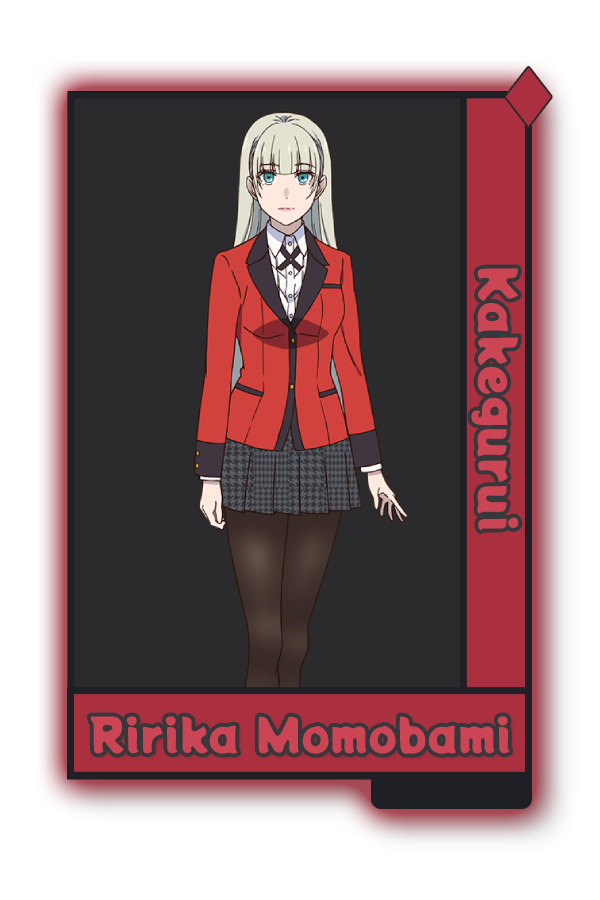
<style>
.page{position:relative;width:600px;height:900px;background:#2b2a2d}
.page>*{position:absolute;margin:0}
.t1{font:80px "DejaVuSans";color:#ab303f}
.t2{font:50px "PottaOne-Regular";color:#cb4554}
.t3{font:46px "PottaOne-Regular";color:#cb4554}
</style>
<div class="page">
<p class="t1" style="left:506px;top:67px;width:45px;height:59px">♦️</p>
<p class="t2" style="left:471px;top:268px;width:48px;height:263px;rotate:90deg">Kakegurui</p>
<p class="t3" style="left:90px;top:716px;width:420px;height:38px">Ririka Momobami</p>
</div>
